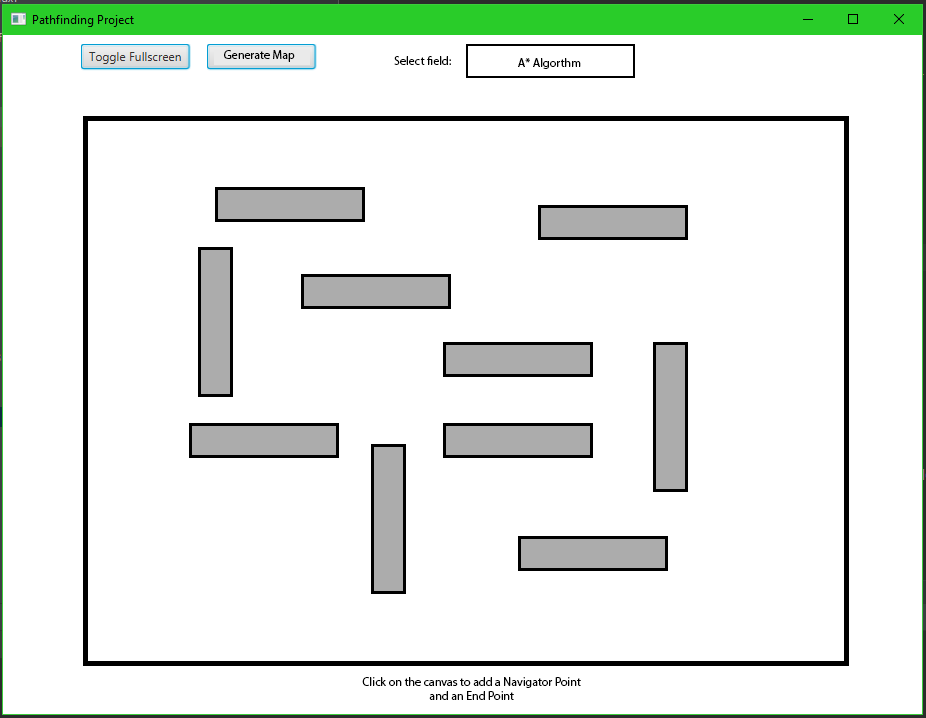
<style>
.page{position:relative;width:926px;height:718px;background:#ffffff}
.page>*{position:absolute;margin:0}
.t1{font:12px "MyriadPro-Regular";color:#000000}
</style>
<div class="page">
<p class="t1" style="left:224px;top:50px;width:71px;height:12px">Generate Map</p>
<p class="t1" style="left:394px;top:56px;width:57px;height:9px">Select field:</p>
<p class="t1" style="left:518px;top:58px;width:63px;height:11px">A* Algorthm</p>
<p class="t1" style="left:362px;top:677px;width:219px;height:23px;text-align:center">Click on the canvas to add a Navigator Point and an End Point</p>
</div>
